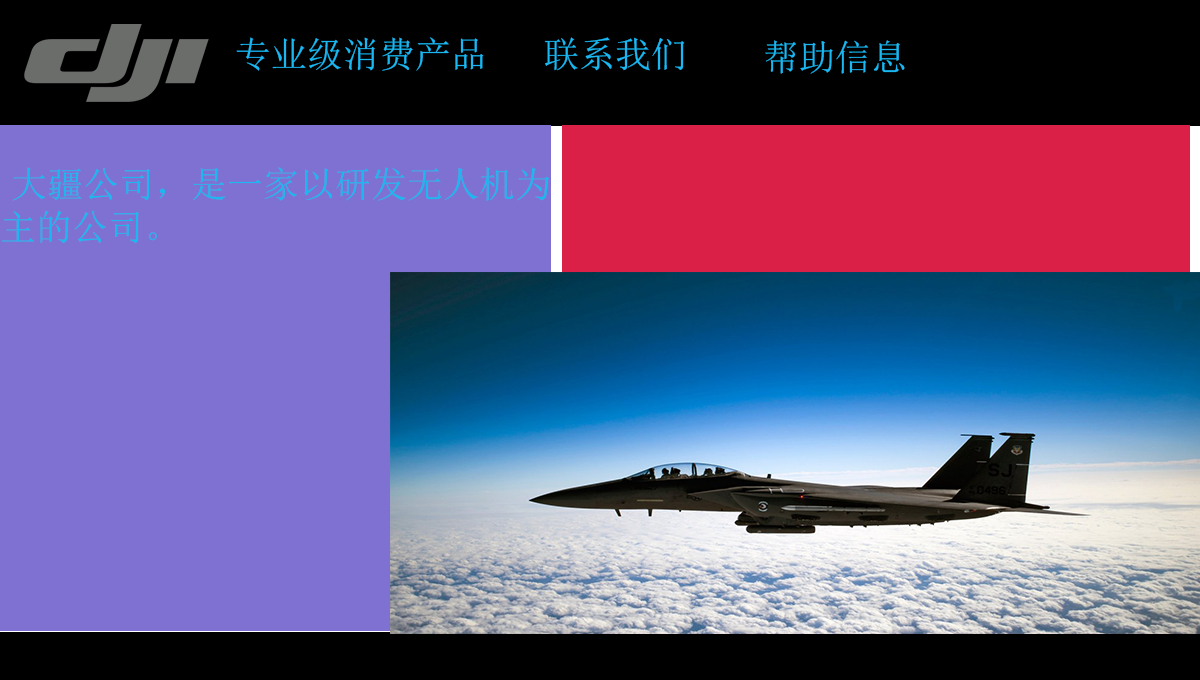
<style>
.page{position:relative;width:1200px;height:680px;background:#7f71d1}
.page>*{position:absolute;margin:0}
.t1{font:36px "SimSun";color:#1ab7f1}
</style>
<div class="page">
<p class="t1" style="left:236px;top:37px;width:248px;height:34px">专业级消费产品</p>
<p class="t1" style="left:544px;top:37px;width:141px;height:34px">联系我们</p>
<p class="t1" style="left:765px;top:40px;width:140px;height:34px">帮助信息</p>
<p class="t1" style="left:12px;top:167px;width:537px;height:34px">大疆公司，是一家以研发无人机为主的公司</p>
<p class="t1" style="left:1px;top:210px;width:156px;height:34px">主的公司。</p>
</div>
